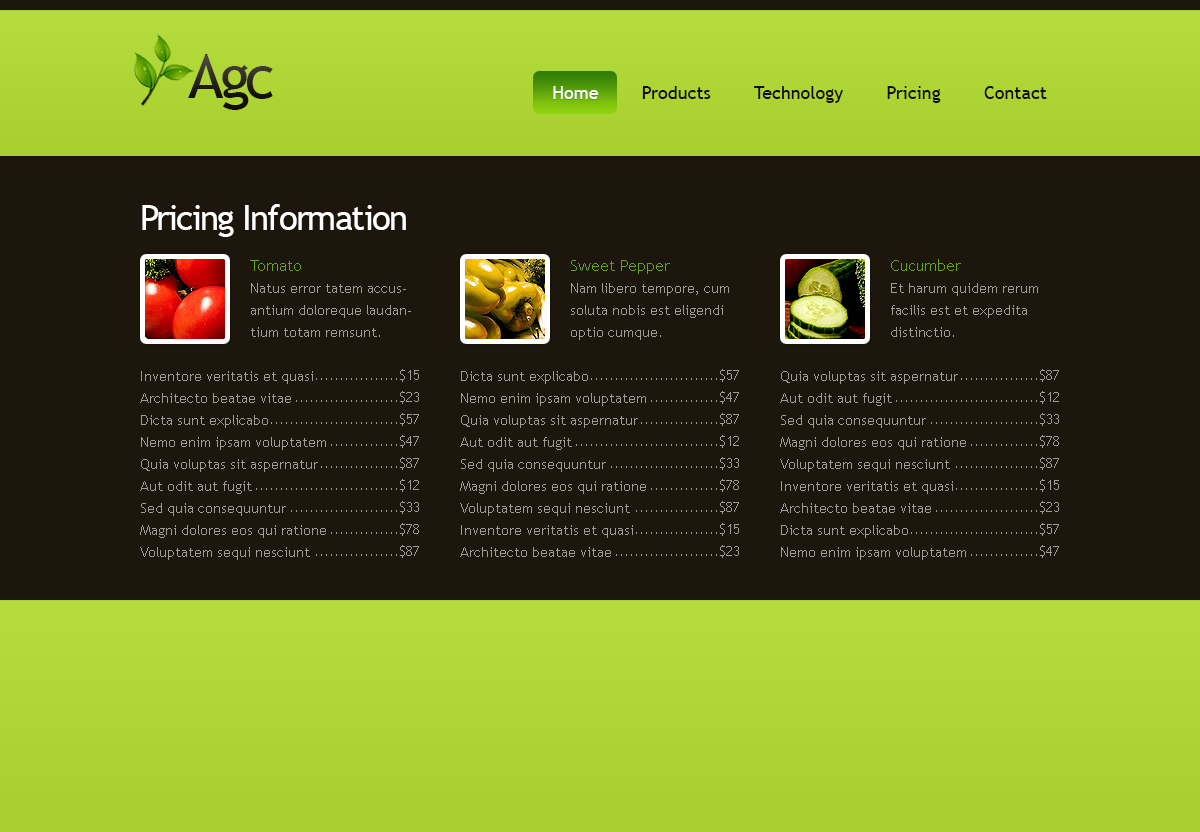
<style>
.page{position:relative;width:1200px;height:832px;background:#1c160d}
.page>*{position:absolute;margin:0}
.t1{font:60px "TrebuchetMS";letter-spacing:-0.1em;color:#241d16}
.t2{font:60px "TrebuchetMS";letter-spacing:-0.05em;color:#241d16}
.t3{font:18px "TrebuchetMS";color:#130c04}
.t4{font:35px "TrebuchetMS";letter-spacing:-0.05em;color:#ffffff}
.t5{font:14px/22px "TrebuchetMS";color:#a09d99}
.t6{font:16px/22px "TrebuchetMS";color:#62a80a}
</style>
<div class="page">
<p class="t1" style="left:188px;top:54px;width:85px;height:56px"><span class="t2">A</span>gc</p>
<p class="t3" style="left:553px;top:86px;width:494px;height:17px">Home        Products        Technology        Pricing        Contact</p>
<p class="t3" style="left:553px;top:86px;width:494px;height:17px">Home        Products        Technology        Pricing        Contact</p>
<p class="t4" style="left:142px;top:204px;width:264px;height:33px">Pricing Information</p>
<p class="t5" style="left:140px;top:260px;width:271px;height:300px"><span class="t6">Tomato<br></span>Natus error tatem accusantium doloreque laudantium totam remsunt.<br><br>Inventore veritatis et quasi<br>Architecto beatae vitae<br>Dicta sunt explicabo<br>Nemo enim ipsam voluptatem<br>Quia voluptas sit aspernatur<br>Aut odit aut fugit<br>Sed quia consequuntur<br>Magni dolores eos qui ratione<br>Voluptatem sequi nesciunt<br>. Neque porro quisquam est, qui dolorem ipsum quia dolor sit amet, consectetur, adipisci velit, sed quia non numquam eius modi tempora incidunt ut labore et dolore magnam aliquam quaerat voluptatem. Ut enim ad minima veniam, quis nostrum exercitationem ullam corporis suscipit laboriosam, nisi ut aliquid ex ea commodi consequatur? Quis autem vel eum iure reprehenderit qui in ea voluptate velit esse quam nihil molestiae consequatur, vel illum qui dolorem eum fugiat quo voluptas nulla pariatur</p>
<p class="t5" style="left:460px;top:260px;width:269px;height:297px"><span class="t6">Sweet Pepper<br></span>Nam libero tempore, cum soluta nobis est eligendi optio cumque.<br><br>Dicta sunt explicabo<br>Nemo enim ipsam voluptatem<br>Quia voluptas sit aspernatur<br>Aut odit aut fugit<br>Sed quia consequuntur<br>Magni dolores eos qui ratione<br>Voluptatem sequi nesciunt<br>Inventore veritatis et quasi<br>Architecto beatae vitae<br><br>. Neque porro quisquam est, qui dolorem ipsum quia dolor sit amet, consectetur, adipisci velit, sed quia non numquam eius modi tempora incidunt ut labore et dolore magnam aliquam quaerat voluptatem. Ut enim ad minima veniam, quis nostrum exercitationem ullam corporis suscipit laboriosam, nisi ut aliquid ex ea commodi consequatur? Quis autem vel eum iure reprehenderit qui in ea voluptate velit esse quam nihil molestiae consequatur, vel illum qui dolorem eum fugiat quo voluptas nulla pariatur</p>
<p class="t5" style="left:780px;top:259px;width:258px;height:301px"><span class="t6">Cucumber<br></span>Et harum quidem rerum facilis est et expedita distinctio.<br><br>Quia voluptas sit aspernatur<br>Aut odit aut fugit<br>Sed quia consequuntur<br>Magni dolores eos qui ratione<br>Voluptatem sequi nesciunt<br>Inventore veritatis et quasi<br>Architecto beatae vitae<br>Dicta sunt explicabo<br>Nemo enim ipsam voluptatem<br>. Neque porro quisquam est, qui dolorem ipsum quia dolor sit amet, consectetur, adipisci velit, sed quia non numquam eius modi tempora incidunt ut labore et dolore magnam aliquam quaerat voluptatem. Ut enim ad minima veniam, quis nostrum exercitationem ullam corporis suscipit laboriosam, nisi ut aliquid ex ea commodi consequatur? Quis autem vel eum iure reprehenderit qui in ea voluptate velit esse quam nihil molestiae consequatur, vel illum qui dolorem eum fugiat quo voluptas nulla pariatur</p>
<p class="t5" style="left:256px;top:369px;width:163px;height:189px;text-align:right">.................$15<br>.....................$23<br>..........................$57<br>..............$47<br>................$87<br>.............................$12<br>......................$33<br>..............$78<br>.................$87</p>
<p class="t5" style="left:576px;top:369px;width:163px;height:189px;text-align:right">..........................$57<br>..............$47<br>................$87<br>.............................$12<br>......................$33<br>..............$78<br>.................$87<br>.................$15<br>.....................$23</p>
<p class="t5" style="left:896px;top:369px;width:163px;height:189px;text-align:right">................$87<br>.............................$12<br>......................$33<br>..............$78<br>.................$87<br>.................$15<br>.....................$23<br>..........................$57<br>..............$47</p>
</div>
